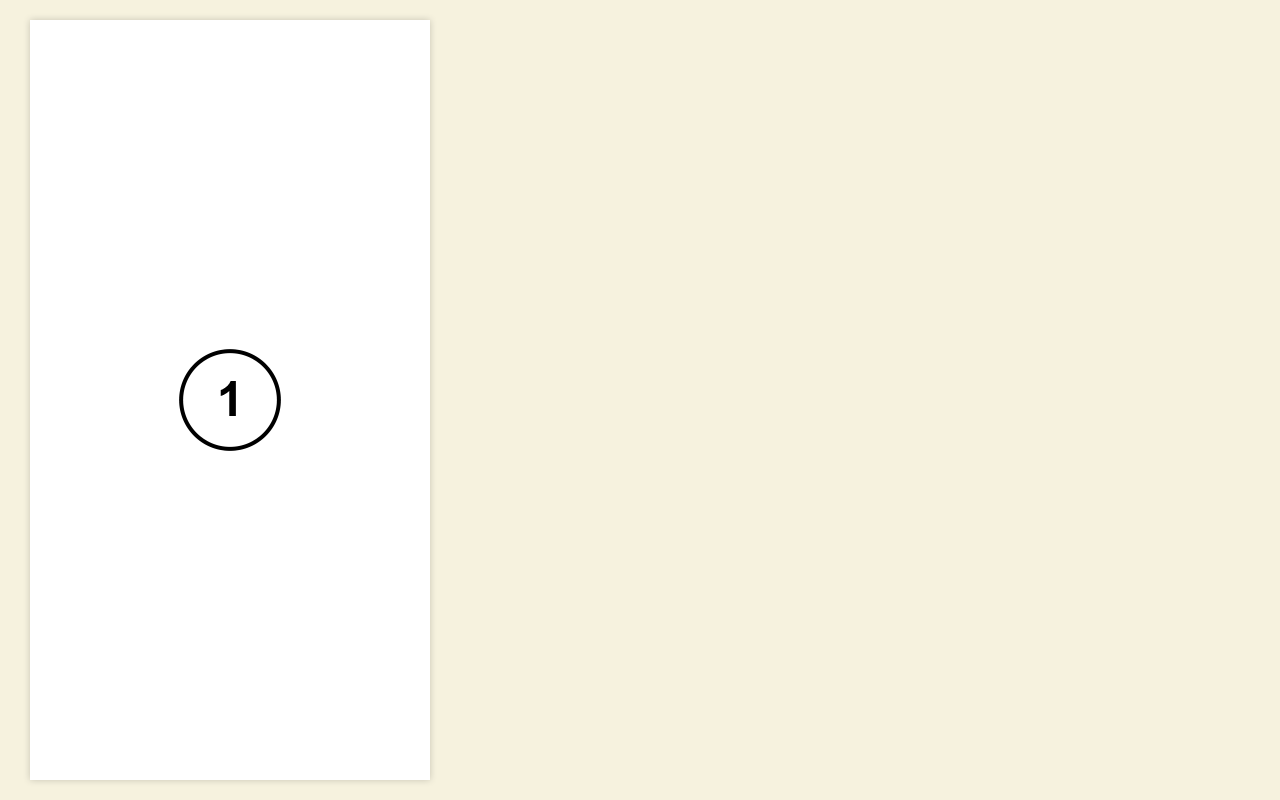
<style>
.page{position:relative;width:1280px;height:800px;background:#f6f2de}
.page>*{position:absolute;margin:0}
.t1{font:48px "Arial-BoldMT";color:#000000}
</style>
<div class="page">
<p class="t1" style="left:220px;top:381px;width:16px;height:35px">1</p>
</div>
